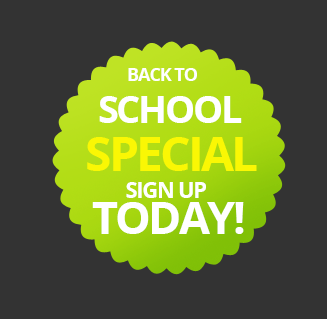
<style>
.page{position:relative;width:327px;height:319px;background:#333333}
.page>*{position:absolute;margin:0}
.t1{font:18px "OpenSans-Bold";letter-spacing:-0.06em;color:#ffffff;text-transform:uppercase}
.t2{font:38px "OpenSans-Bold";letter-spacing:-0.06em;color:#ffffff;text-transform:uppercase}
.t3{font:48px "OpenSans-Bold";letter-spacing:-0.06em;color:#faf704;text-transform:uppercase}
.t4{font:22px "OpenSans-Bold";letter-spacing:-0.06em;color:#ffffff;text-transform:uppercase}
.t5{font:45px "OpenSans-Bold";letter-spacing:-0.06em;color:#ffffff;text-transform:uppercase}
</style>
<div class="page">
<p class="t1" style="left:128px;top:68px;width:69px;height:13px">Back to</p>
<p class="t2" style="left:99px;top:96px;width:143px;height:27px">School</p>
<p class="t3" style="left:87px;top:137px;width:170px;height:34px">Special</p>
<p class="t4" style="left:126px;top:182px;width:80px;height:16px">Sign UP</p>
<p class="t5" style="left:92px;top:202px;width:152px;height:32px">TODAY!</p>
</div>
